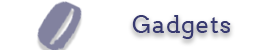
<style>
.page{position:relative;width:273px;height:50px;background:#ffffff}
.page>*{position:absolute;margin:0}
.t1{font:24px "Arvo";letter-spacing:0.02em;color:#37396f}
</style>
<div class="page">
<p class="t1" style="left:132px;top:15px;width:99px;height:24px">Gadgets</p>
</div>
